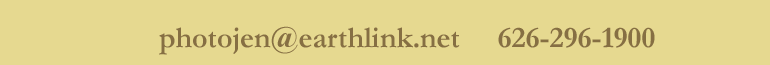
<style>
.page{position:relative;width:770px;height:65px;background:#e6d990}
.page>*{position:absolute;margin:0}
.t1{font:29.9px "Garamond-Bold";color:#866f43}
</style>
<div class="page">
<p class="t1" style="left:159px;top:26px;width:496px;height:29px">photojen@earthlink.net     626-296-1900</p>
</div>
